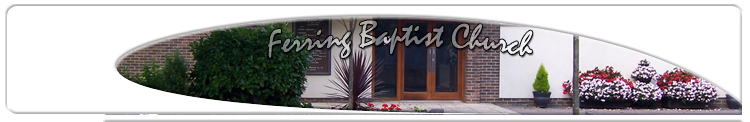
<style>
.page{position:relative;width:750px;height:122px;background:#ffffff}
.page>*{position:absolute;margin:0}
.t1{font:36px "Mistral"}
</style>
<div class="page">
<p class="t1" style="left:267px;top:20px;width:266px;height:38px">Ferring Baptist Church</p>
</div>
